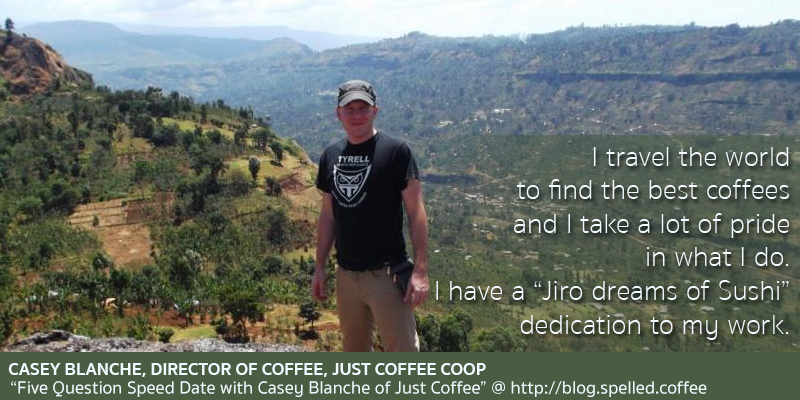
<style>
.page{position:relative;width:800px;height:400px}
.page>*{position:absolute;margin:0}
.t1{font:28px "SukhumvitSet-Thin";color:#f2fbff}
.t2{font:18px "SukhumvitSet-Bold";color:#effaff}
.t3{font:18px "SukhumvitSet-Medium";color:#effaff}
</style>
<div class="page">
<p class="t1" style="left:436px;top:147px;width:353px;height:193px;text-align:right">I travel the world<br>to find the best coffees<br>and I take a lot of pride<br>in what I do.<br>I have a “Jiro dreams of Sushi”<br>dedication to my work.</p>
<p class="t2" style="left:8px;top:363px;width:478px;height:14px">CASEY BLANCHE, DIRECTOR OF COFFEE, JUST COFFEE COOP</p>
<p class="t3" style="left:11px;top:381px;width:696px;height:16px">“Five Question Speed Date with Casey Blanche of Just Coffee” @ http://blog.spelled.coffee</p>
</div>
